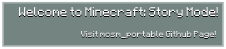
<style>
.page{position:relative;width:226px;height:49px;background:#748480}
.page>*{position:absolute;margin:0}
.t1{font:10px "Minecraft";color:#ffffff}
.t2{font:7px "Minecraft";color:#ffffff}
</style>
<div class="page">
<p class="t1" style="left:19px;top:7px;width:199px;height:11px">Welcome to Minecraft: Story Mode!</p>
<p class="t2" style="left:81px;top:30px;width:135px;height:8px">Visit mcsm_portable Github Page!</p>
</div>
